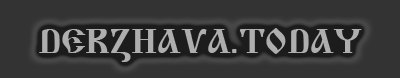
<style>
.page{position:relative;width:400px;height:78px;background:#333333}
.page>*{position:absolute;margin:0}
.t1{font:36px "CyrillicOld";color:#aeaeae}
</style>
<div class="page">
<p class="t1" style="left:39px;top:28px;width:323px;height:34px">DERZHAVA.TODAY</p>
</div>
